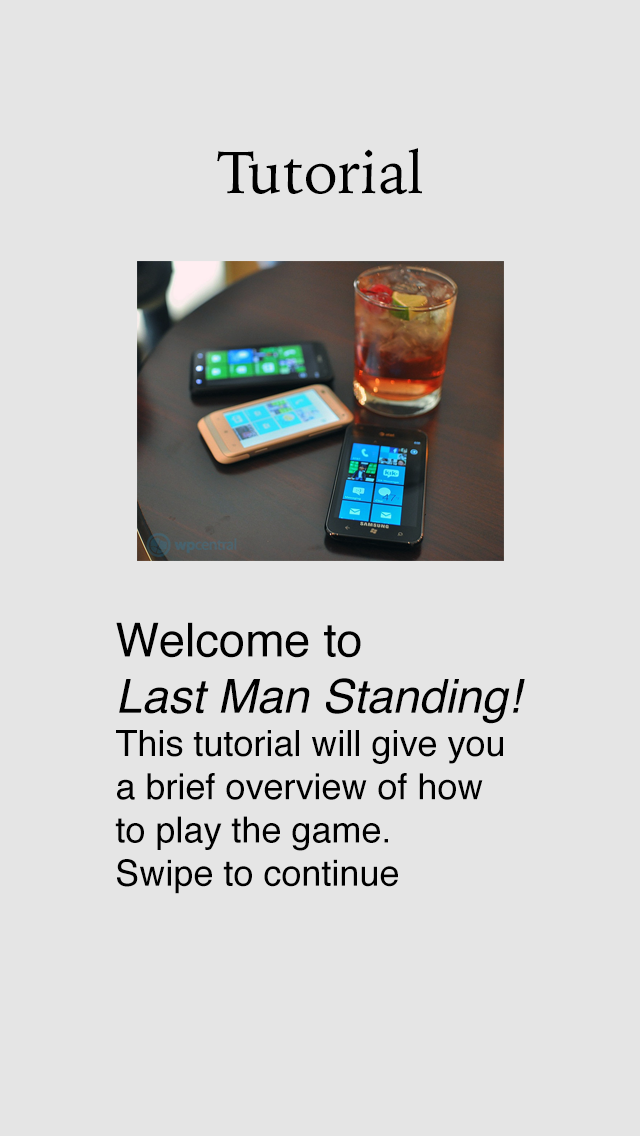
<style>
.page{position:relative;width:640px;height:1136px;background:#e5e5e5}
.page>*{position:absolute;margin:0}
.t1{font:60px "IowanOldStyle-Roman";color:#000000}
.t2{font:36px "Helvetica";color:#000000}
.t3{font:47px "Helvetica";color:#000000}
.t4{font:47px "Helvetica-Oblique";color:#000000}
</style>
<div class="page">
<p class="t1" style="left:217px;top:148px;width:205px;height:47px">Tutorial</p>
<p class="t2" style="left:115px;top:622px;width:410px;height:272px"><span class="t3">Welcome to<br></span><span class="t4">Last Man Standing!<br></span>This tutorial will give you<br>a brief overview of how<br>to play the game.<br>Swipe to continue</p>
</div>
